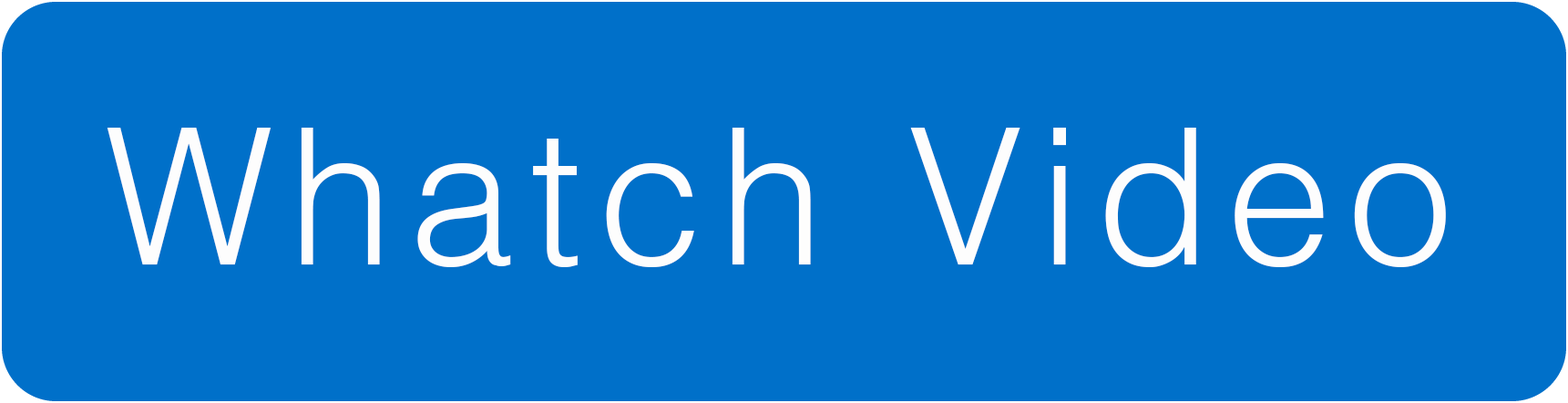
<style>
.page{position:relative;width:1568px;height:403px;background:#0070c9}
.page>*{position:absolute;margin:0}
.t1{font:189.8px "Helvetica-Light";letter-spacing:0.08em;color:#fdfdfd}
</style>
<div class="page">
<p class="t1" style="left:107px;top:128px;width:1339px;height:139px">Whatch Video</p>
</div>
